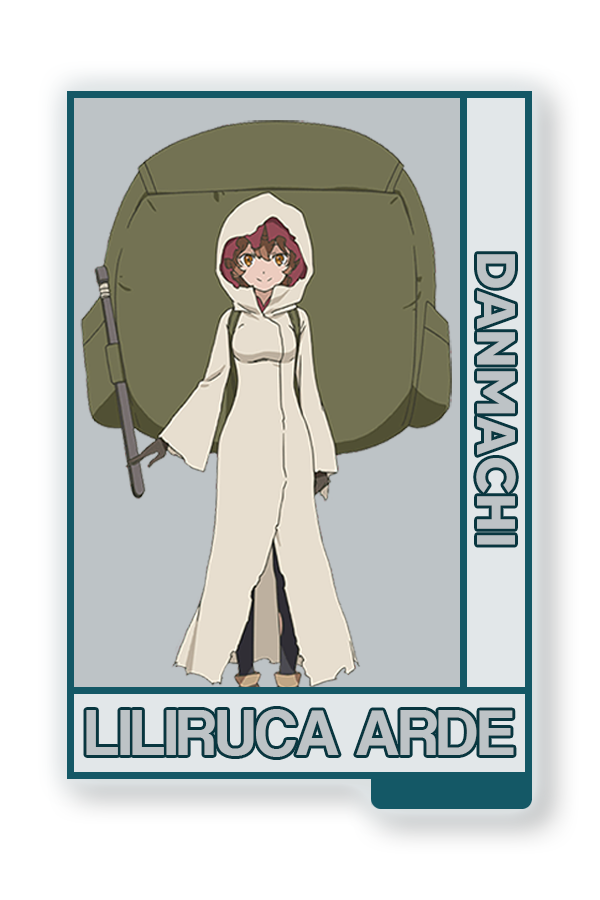
<style>
.page{position:relative;width:600px;height:900px;background:#ffffff}
.page>*{position:absolute;margin:0}
.t1{font:54.4px "MADETOMMY-Bold";color:#bdc3c6}
.t2{font:67px "CoolveticaRg-Regular";color:#bdc3c6}
</style>
<div class="page">
<p class="t1" style="left:476px;top:254px;width:40px;height:291px;rotate:90deg">DANMACHI</p>
<p class="t2" style="left:86px;top:709px;width:428px;height:48px">LILIRUCA ARDE</p>
</div>
